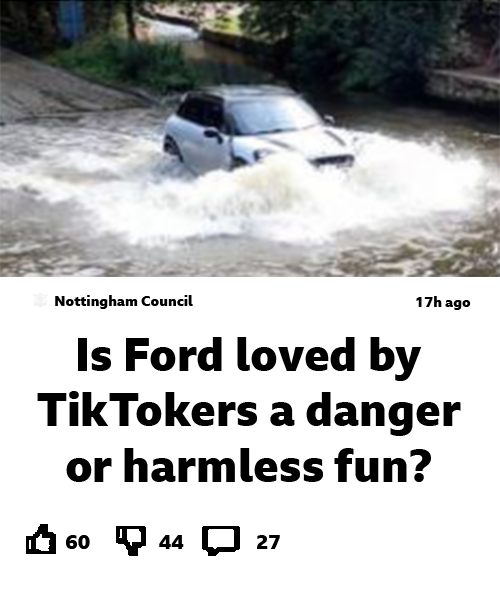
<style>
.page{position:relative;width:500px;height:600px;background:#ffffff}
.page>*{position:absolute;margin:0}
.t1{font:14.3px "BBCReithSans-XBold";color:#000000}
.t2{font:46px "BBCReithSans-XBold";color:#000000}
.t3{font:20px "BBCReithSans-XBold";color:#000000}
</style>
<div class="page">
<p class="t1" style="left:55px;top:295px;width:138px;height:14px">Nottingham Council</p>
<p class="t1" style="left:416px;top:296px;width:55px;height:14px">17h ago</p>
<p class="t2" style="left:37px;top:337px;width:424px;height:145px;text-align:center">Is Ford loved by TikTokers a danger or harmless fun?</p>
<p class="t3" style="left:66px;top:535px;width:24px;height:14px">60</p>
<p class="t3" style="left:159px;top:535px;width:25px;height:14px">44</p>
<p class="t3" style="left:257px;top:535px;width:23px;height:14px">27</p>
</div>
